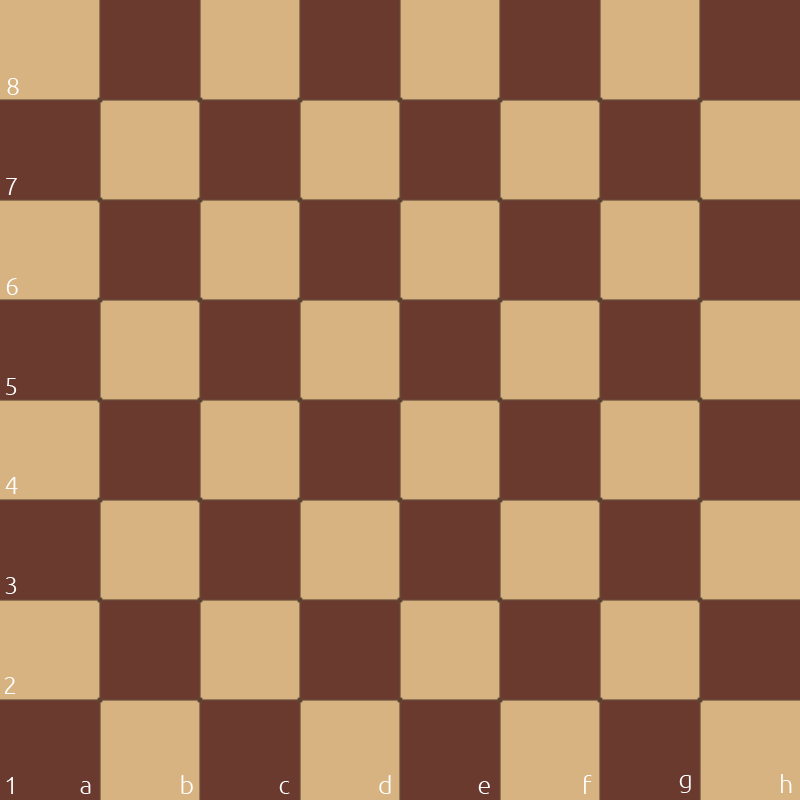
<style>
.page{position:relative;width:800px;height:800px;background:#d8b382}
.page>*{position:absolute;margin:0}
.t1{font:25.4px "Ubuntu-Light";color:#ffffff}
</style>
<div class="page">
<p class="t1" style="left:7px;top:78px;width:12px;height:17px">8</p>
<p class="t1" style="left:6px;top:178px;width:11px;height:17px">7</p>
<p class="t1" style="left:6px;top:278px;width:12px;height:17px">6</p>
<p class="t1" style="left:5px;top:378px;width:12px;height:17px">5</p>
<p class="t1" style="left:5px;top:477px;width:13px;height:17px">4</p>
<p class="t1" style="left:5px;top:577px;width:12px;height:17px">3</p>
<p class="t1" style="left:4px;top:677px;width:12px;height:17px">2</p>
<p class="t1" style="left:781px;top:774px;width:11px;height:19px">h</p>
<p class="t1" style="left:6px;top:777px;width:7px;height:17px">1</p>
<p class="t1" style="left:80px;top:781px;width:11px;height:13px">a</p>
<p class="t1" style="left:181px;top:775px;width:12px;height:19px">b</p>
<p class="t1" style="left:279px;top:781px;width:11px;height:13px">c</p>
<p class="t1" style="left:379px;top:775px;width:12px;height:19px">d</p>
<p class="t1" style="left:478px;top:781px;width:12px;height:13px">e</p>
<p class="t1" style="left:584px;top:775px;width:8px;height:19px">f</p>
<p class="t1" style="left:679px;top:775px;width:12px;height:18px">g</p>
</div>
